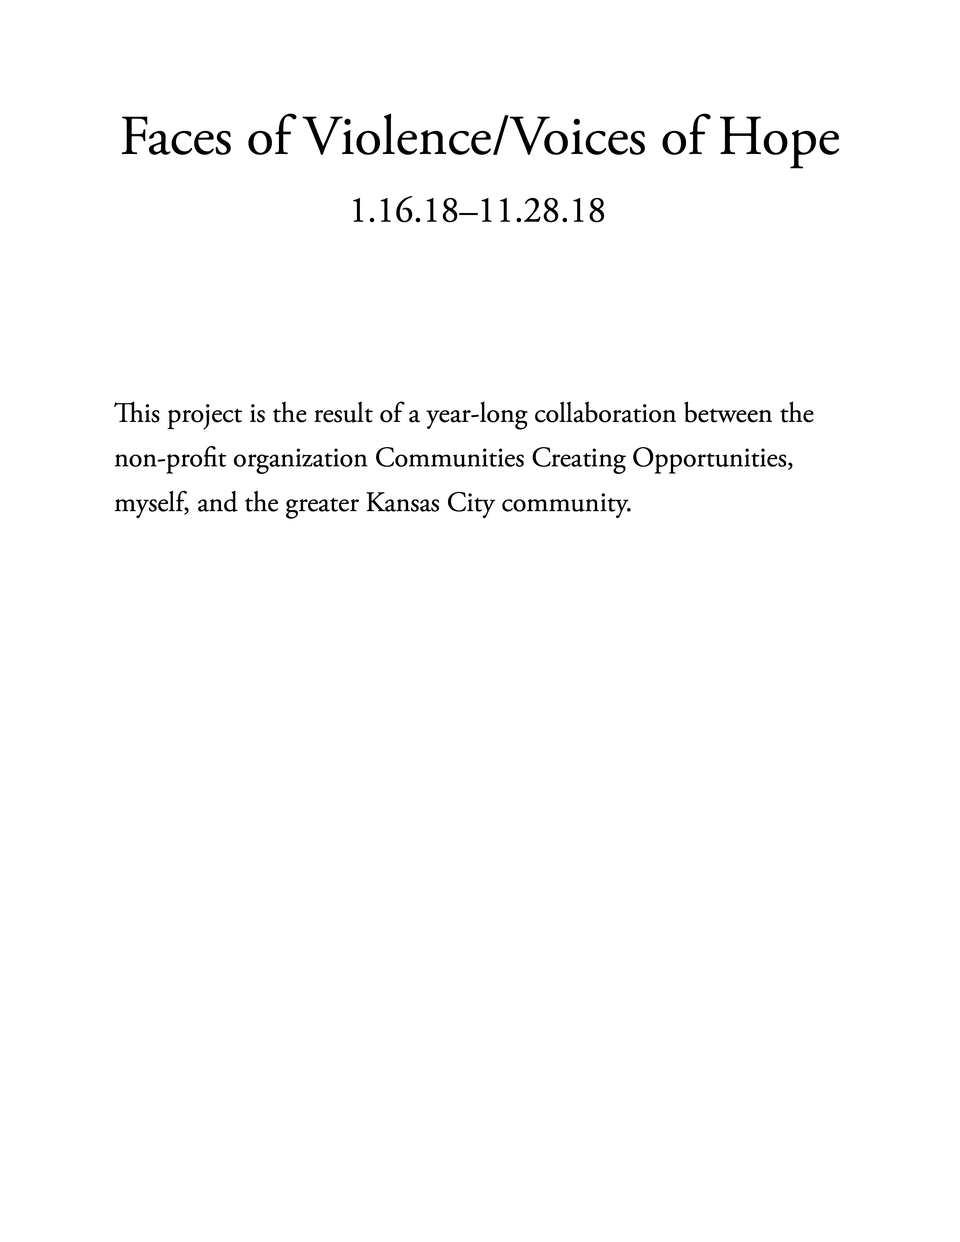
<style>
.page{position:relative;width:960px;height:1242px;background:#ffffff}
.page>*{position:absolute;margin:0}
.t1{font:56px "AGaramondPro-Regular";color:#000000}
.t2{font:36.7px "AGaramondPro-Regular";color:#000000}
.t3{font:28px/44.6px "AGaramondPro-Regular";color:#000000}
</style>
<div class="page">
<p class="t1" style="left:122px;top:114px;width:717px;height:55px">Faces of Violence/Voices of Hope</p>
<p class="t2" style="left:353px;top:196px;width:251px;height:26px">1.16.18–11.28.18</p>
<p class="t3" style="left:114px;top:402px;width:699px;height:117px">This project is the result of a year-long collaboration between the non-profit organization Communities Creating Opportunities, myself, and the greater Kansas City community.</p>
</div>
